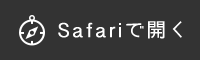
<style>
.page{position:relative;width:200px;height:60px;background:#333333}
.page>*{position:absolute;margin:0}
.t1{font:20px "MyanmarSangamMN";letter-spacing:0.1em;color:#ffffff;font-weight:bold}
.t2{font:20px "BokutachinoGothic";letter-spacing:0.1em;color:#ffffff}
</style>
<div class="page">
<p class="t1" style="left:58px;top:21px;width:124px;height:18px">Safari<span class="t2">で開く</span></p>
</div>
